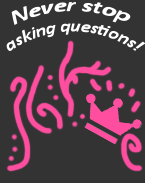
<style>
.page{position:relative;width:145px;height:183px;background:#333333}
.page>*{position:absolute;margin:0}
.t1{font:17px "Calibri-BoldItalic";color:#ffffff}
.t2{font:20px "Calibri-BoldItalic";color:#ffffff}
</style>
<div class="page">
<p class="t1" style="left:6px;top:2px;width:140px;height:49px;text-align:center"><span class="t2">Never stop <br></span>asking questions!</p>
</div>
